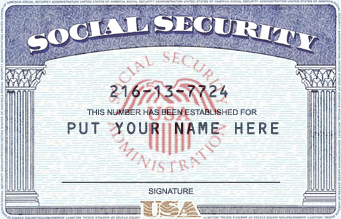
<style>
.page{position:relative;width:341px;height:219px}
.page>*{position:absolute;margin:0}
.t1{font:15.3px "ocrb10";letter-spacing:-0.002em}
.t2{font:7.8px "ArialMT";letter-spacing:-0.002em;color:#454e60}
.t3{font:16.6px "ocrb10";letter-spacing:-0.002em;color:#404053}
.t4{font:7.8px "ArialMT";letter-spacing:-0.002em;color:#525a6b}
</style>
<div class="page">
<p class="t1" style="left:110px;top:85px;width:118px;height:13px">216-13-7724</p>
<p class="t2" style="left:87px;top:109px;width:170px;height:7px">THIS NUMBER HAS BEEN ESTABLISHED FOR</p>
<p class="t3" style="left:67px;top:122px;width:212px;height:13px;opacity:0.85">PUT YOUR NAME HERE</p>
<p class="t4" style="left:148px;top:188px;width:46px;height:7px">SIGNATURE</p>
</div>
